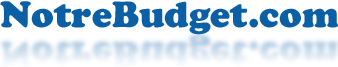
<style>
.page{position:relative;width:338px;height:67px;background:#ffffff}
.page>*{position:absolute;margin:0}
.t1{font:35.9px "CooperBlackStd";color:#0b5fa5}
</style>
<div class="page">
<p class="t1" style="left:0px;top:1px;width:338px;height:34px">NotreBudget.com</p>
</div>
